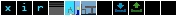
<style>
.page{position:relative;width:177px;height:16px;background:#000000}
.page>*{position:absolute;margin:0}
.t1{font:12px "OCRAbyBT-Regular"}
.t2{font:12px "OCRAbyBT-Regular";color:#34e0ff}
</style>
<div class="page">
<p class="t1" style="left:5px;top:6px;width:6px;height:5px">x</p>
<p class="t2" style="left:22px;top:3px;width:5px;height:8px">i</p>
<p class="t2" style="left:37px;top:6px;width:6px;height:5px">r</p>
</div>
